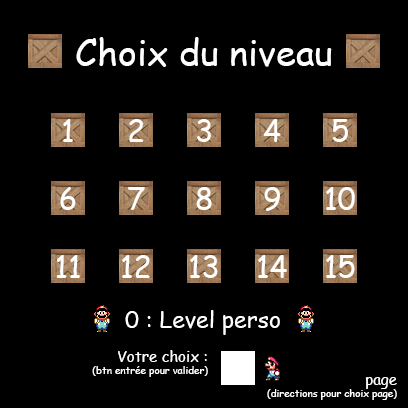
<style>
.page{position:relative;width:408px;height:408px;background:#000000}
.page>*{position:absolute;margin:0}
.t1{font:36px "ComicSansMS";color:#ffffff}
.t2{font:30px "ComicSansMS";color:#ffffff}
.t3{font:23px "ComicSansMS";color:#ffffff}
.t4{font:10px "ComicSansMS";color:#ffffff}
.t5{font:15px "ComicSansMS";color:#ffffff}
</style>
<div class="page">
<p class="t1" style="left:76px;top:37px;width:256px;height:30px">Choix du niveau</p>
<p class="t2" style="left:63px;top:119px;width:10px;height:23px">1</p>
<p class="t2" style="left:129px;top:119px;width:15px;height:23px">2</p>
<p class="t2" style="left:197px;top:119px;width:14px;height:23px">3</p>
<p class="t2" style="left:263px;top:119px;width:18px;height:23px">4</p>
<p class="t2" style="left:332px;top:119px;width:16px;height:23px">5</p>
<p class="t2" style="left:60px;top:187px;width:16px;height:23px">6</p>
<p class="t2" style="left:128px;top:187px;width:17px;height:23px">7</p>
<p class="t2" style="left:196px;top:187px;width:16px;height:23px">8</p>
<p class="t2" style="left:264px;top:187px;width:16px;height:24px">9</p>
<p class="t2" style="left:326px;top:187px;width:29px;height:23px">10</p>
<p class="t2" style="left:56px;top:255px;width:24px;height:23px">11</p>
<p class="t2" style="left:122px;top:255px;width:28px;height:23px">12</p>
<p class="t2" style="left:190px;top:255px;width:28px;height:23px">13</p>
<p class="t2" style="left:258px;top:255px;width:29px;height:23px">14</p>
<p class="t2" style="left:326px;top:255px;width:29px;height:23px">15</p>
<p class="t3" style="left:125px;top:310px;width:155px;height:25px">0 : Level perso</p>
<p class="t4" style="left:92px;top:350px;width:116px;height:27px;text-align:right"><span class="t5">Votre choix :      <br></span>(btn entrée pour valider)</p>
<p class="t4" style="left:267px;top:377px;width:130px;height:23px;text-align:right"><span class="t5">page  <br></span>(directions pour choix page)</p>
</div>
